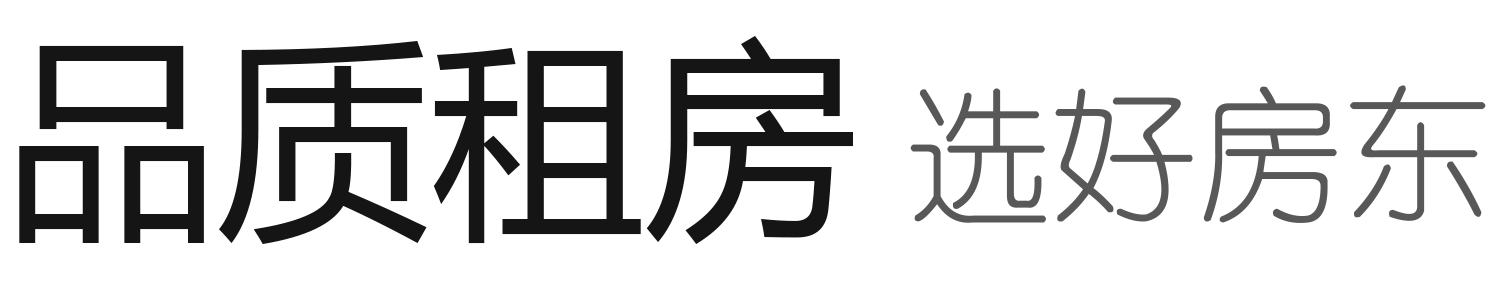
<style>
.page{position:relative;width:1500px;height:300px;background:#ffffff}
.page>*{position:absolute;margin:0}
.t1{font:213.3px "MicrosoftYaHei";color:#151515}
.t2{font:146.7px "YouYuan";color:#585858}
</style>
<div class="page">
<p class="t1" style="left:19px;top:35px;width:834px;height:209px">品质租房</p>
<p class="t2" style="left:910px;top:85px;width:576px;height:138px">选好房东</p>
</div>
